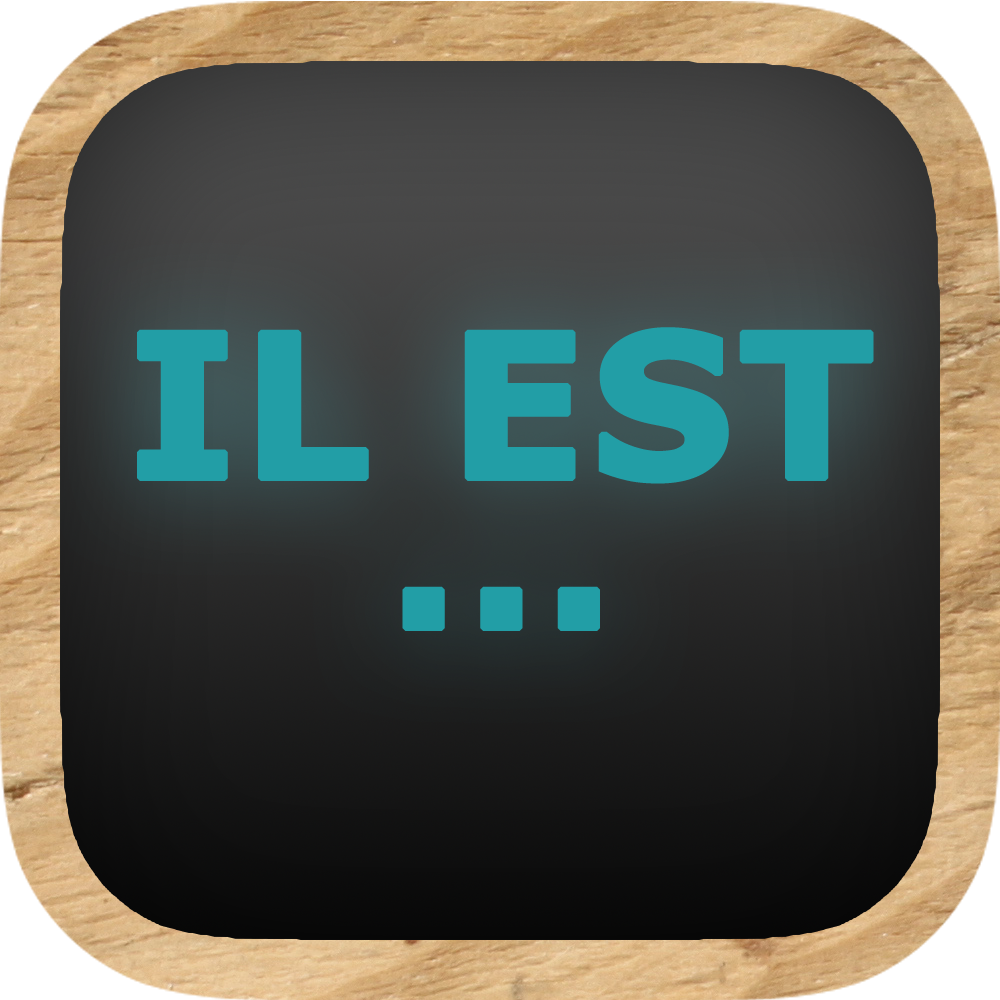
<style>
.page{position:relative;width:1000px;height:1000px}
.page>*{position:absolute;margin:0}
.t1{font:200px/150px "Verdana-Bold";color:#229ea6;font-weight:bold}
</style>
<div class="page">
<p class="t1" style="left:137px;top:327px;width:737px;height:304px;text-align:center">IL EST<br>...</p>
</div>
